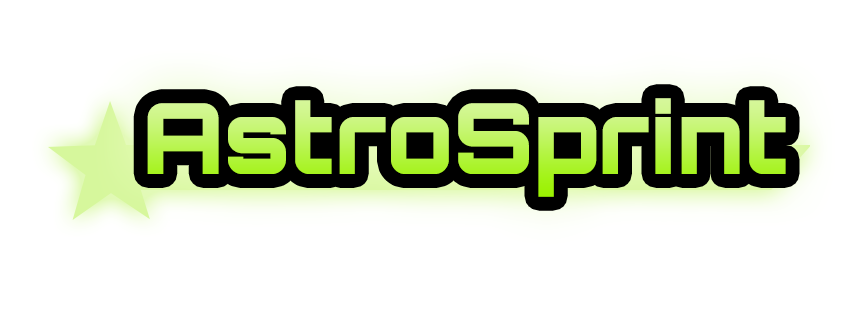
<style>
.page{position:relative;width:857px;height:318px;background:#ffffff}
.page>*{position:absolute;margin:0}
.t1{font:98px "Orbitron-Black";letter-spacing:-0.005em}
</style>
<div class="page">
<p class="t1" style="left:147px;top:98px;width:639px;height:99px">AstroSprint</p>
</div>
